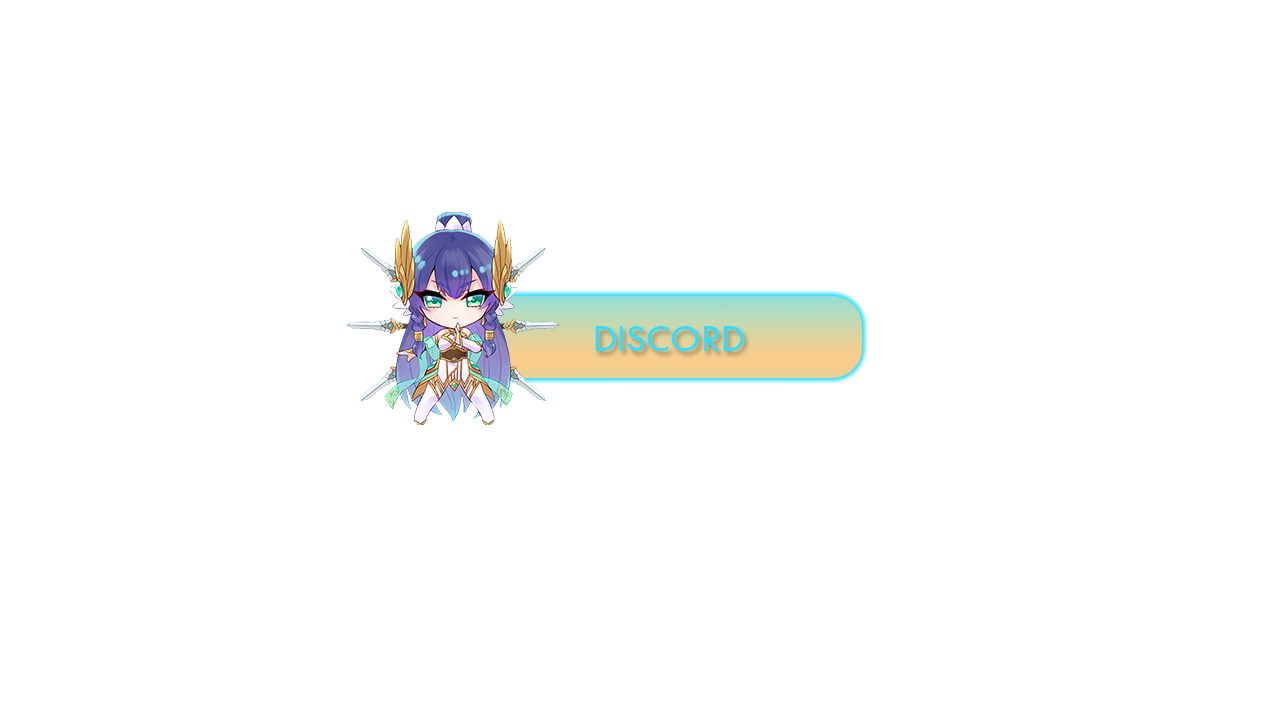
<style>
.page{position:relative;width:1280px;height:720px;background:#ffffff}
.page>*{position:absolute;margin:0}
.t1{font:40px "TwCenMT-Regular";color:#2fddfc}
</style>
<div class="page">
<p class="t1" style="left:595px;top:326px;width:149px;height:25px">DISCORD</p>
</div>
